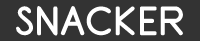
<style>
.page{position:relative;width:200px;height:41px;background:#333333}
.page>*{position:absolute;margin:0}
.t1{font:41.6px "PrimerPrint-Bold";letter-spacing:-0.025em;color:#ffffff;text-transform:uppercase}
</style>
<div class="page">
<p class="t1" style="left:16px;top:6px;width:167px;height:30px">snacker</p>
</div>
